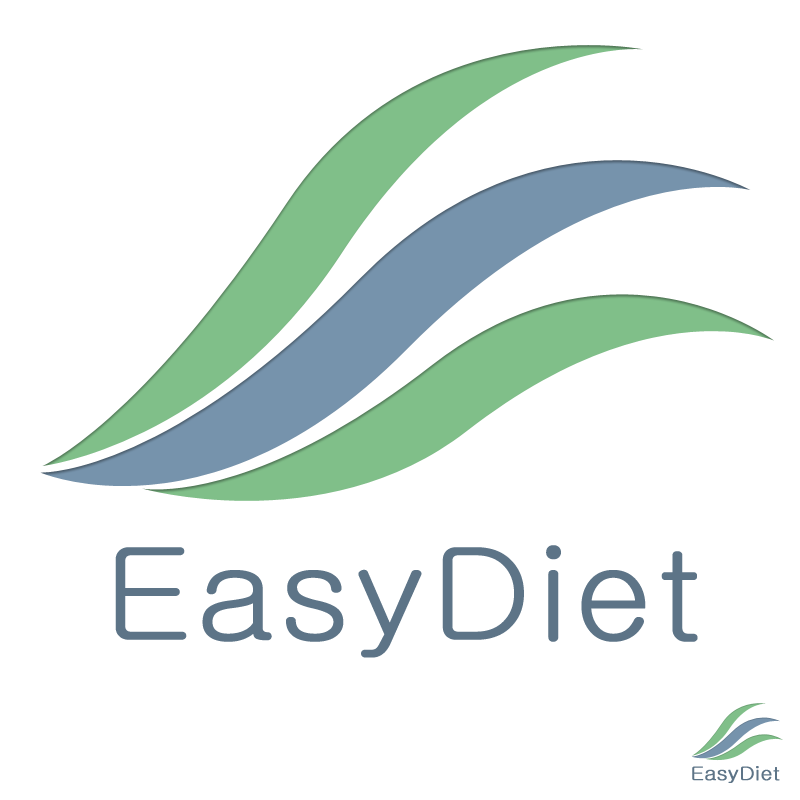
<style>
.page{position:relative;width:800px;height:800px;background:#ffffff}
.page>*{position:absolute;margin:0}
.t1{font:127px "Gulim";color:#5d7487;font-weight:bold;scale:1.11 1}
.t2{font:18.9px "Gulim";color:#5d7487;font-weight:bold;scale:1.11 1}
</style>
<div class="page">
<p class="t1" style="left:115px;top:545px;width:583px;height:113px">EasyDiet</p>
<p class="t2" style="left:692px;top:766px;width:88px;height:17px">EasyDiet</p>
</div>
